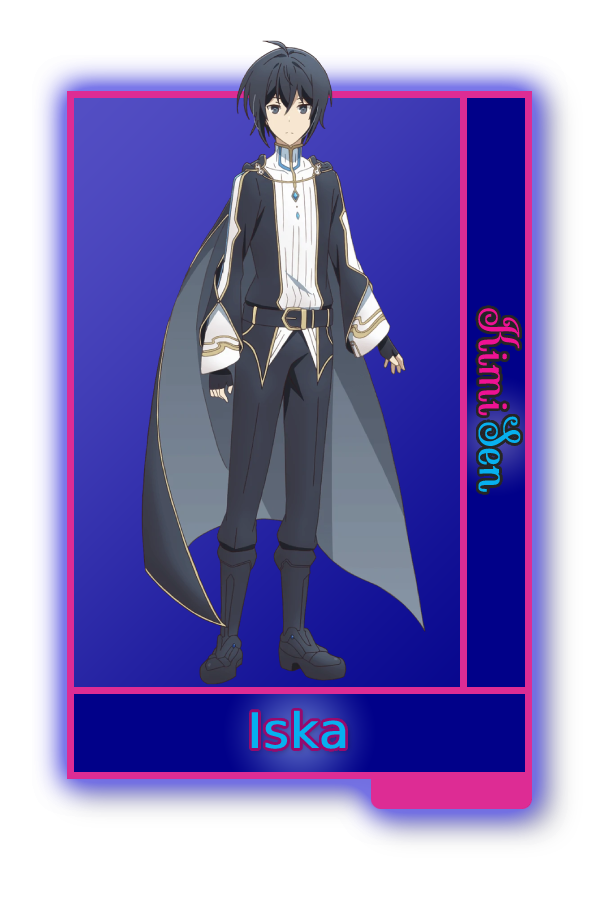
<style>
.page{position:relative;width:600px;height:900px}
.page>*{position:absolute;margin:0}
.t1{font:48.8px "Sevillana-Regular";color:#ee1294;font-weight:bold}
.t2{font:48.8px "Sevillana-Regular";color:#07b0ef;font-weight:bold}
.t3{font:49px "CoolveticaRg-Regular";color:#07b0ef;font-weight:bold}
</style>
<div class="page">
<p class="t1" style="left:478px;top:308px;width:43px;height:184px;rotate:90deg">Kimi<span class="t2">Sen</span></p>
<p class="t3" style="left:251px;top:710px;width:95px;height:39px">Iska</p>
</div>
